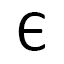
<style>
.page{position:relative;width:64px;height:64px;background:#ffffff}
.page>*{position:absolute;margin:0}
.t1{font:58.3px "Calibri";color:#000000}
</style>
<div class="page">
<p class="t1" style="left:18px;top:12px;width:28px;height:39px">Є</p>
</div>
